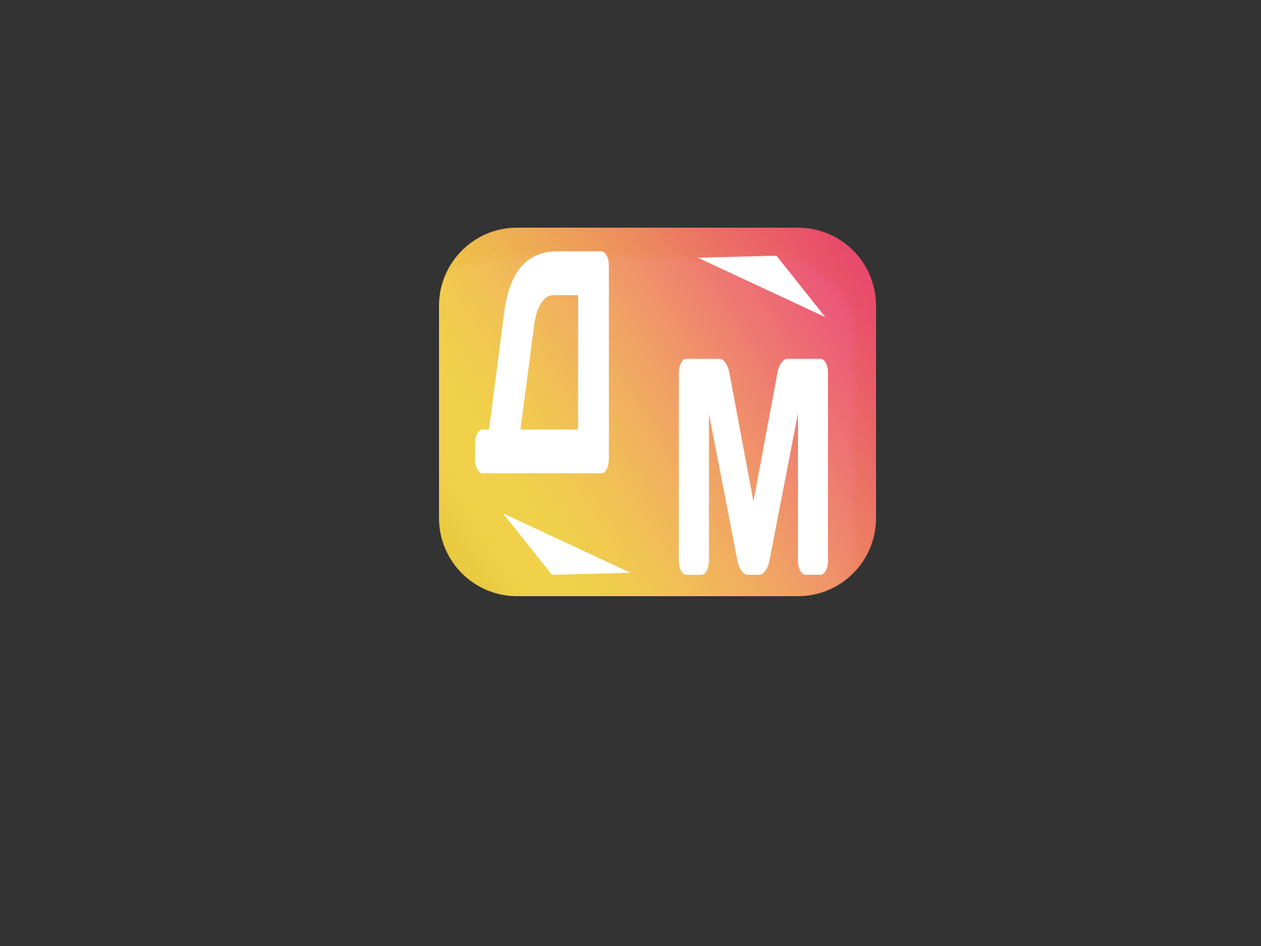
<style>
.page{position:relative;width:1261px;height:946px;background:#333333}
.page>*{position:absolute;margin:0}
.t1{font:317px "Days";color:#ffffff;scale:0.53 1}
.t2{font:308.6px "Days";color:#ffffff;scale:0.54 1}
</style>
<div class="page">
<p class="t1" style="left:475px;top:251px;width:134px;height:222px">Д</p>
<p class="t2" style="left:679px;top:358px;width:149px;height:217px">М</p>
</div>
